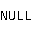
<style>
.page{position:relative;width:32px;height:32px;background:#ffffff}
.page>*{position:absolute;margin:0}
.t1{font:14px "Consolas";color:#000000}
</style>
<div class="page">
<p class="t1" style="left:1px;top:11px;width:30px;height:9px">NULL</p>
</div>
